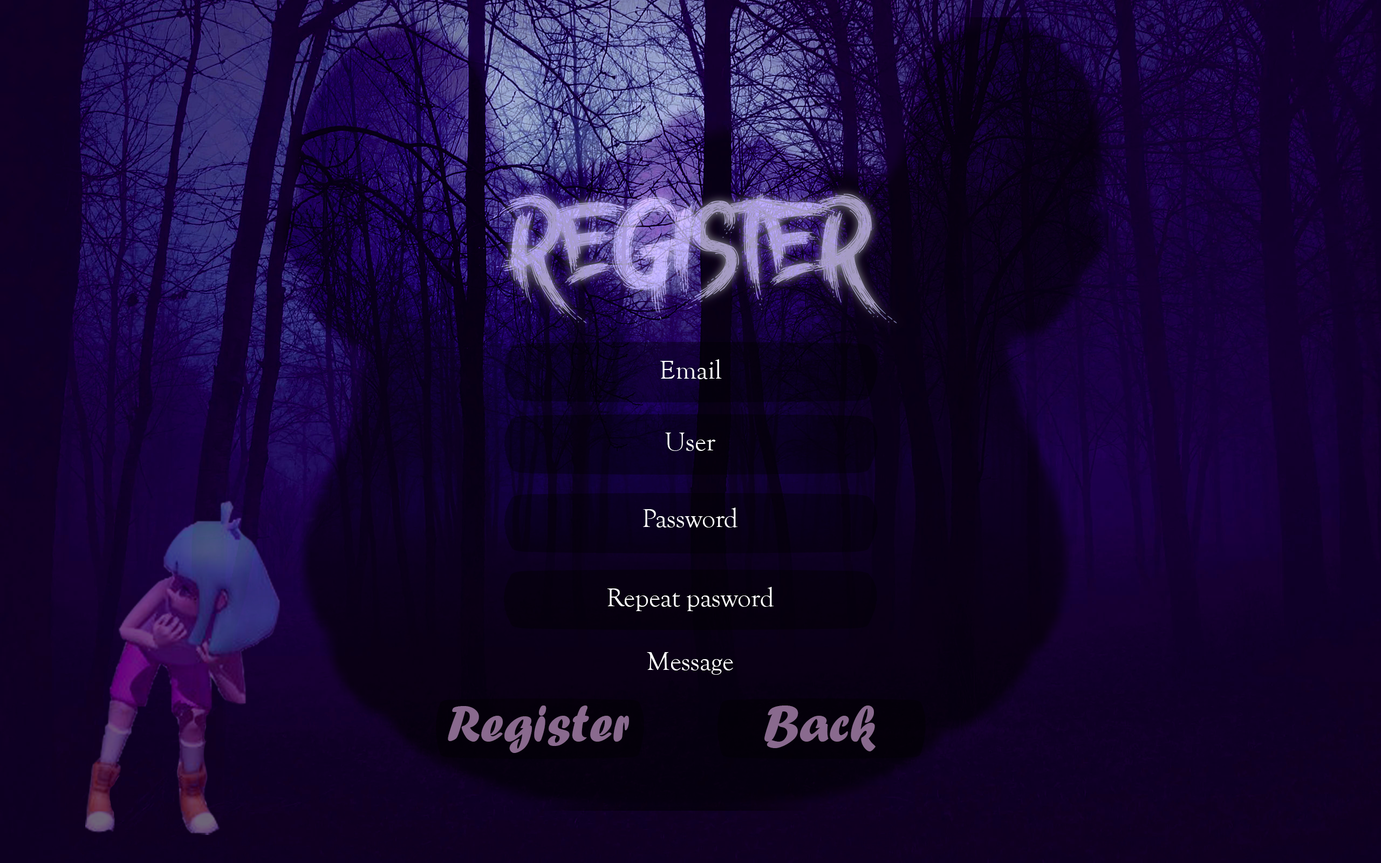
<style>
.page{position:relative;width:1381px;height:863px}
.page>*{position:absolute;margin:0}
.t1{font:107.9px "NightcoreDemo";color:#a99cd5}
.t2{font:27px "GoudyOldStyleT-Regular";color:#ffffff}
.t3{font:54px "ForteMT";color:#896a8e}
</style>
<div class="page">
<p class="t1" style="left:488px;top:188px;width:409px;height:136px">REGISTER</p>
<p class="t1" style="left:488px;top:188px;width:409px;height:136px">REGISTER</p>
<p class="t2" style="left:660px;top:359px;width:62px;height:20px">Email</p>
<p class="t2" style="left:665px;top:433px;width:51px;height:18px">User</p>
<p class="t2" style="left:643px;top:508px;width:95px;height:20px">Password</p>
<p class="t2" style="left:608px;top:587px;width:166px;height:24px">Repeat pasword</p>
<p class="t2" style="left:647px;top:652px;width:86px;height:23px">Message</p>
<p class="t3" style="left:448px;top:706px;width:181px;height:47px">Register</p>
<p class="t3" style="left:765px;top:706px;width:111px;height:46px">Back</p>
</div>
